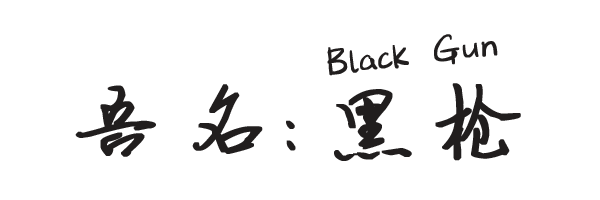
<style>
.page{position:relative;width:600px;height:200px;background:#ffffff}
.page>*{position:absolute;margin:0}
.t1{font:36.7px "SentyTEApro";letter-spacing:0.025em;color:#211e1e;font-weight:bold}
.t2{font:100px "--";letter-spacing:0.025em;color:#211e1e;font-weight:bold}
</style>
<div class="page">
<p class="t1" style="left:327px;top:34px;width:171px;height:42px;rotate:-7deg">Black  Gun</p>
<p class="t2" style="left:75px;top:84px;width:221px;height:73px">吾名:</p>
<p class="t2" style="left:334px;top:83px;width:187px;height:78px">黑枪</p>
</div>
